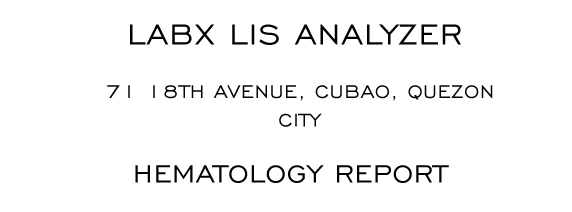
<style>
.page{position:relative;width:572px;height:212px;background:#ffffff}
.page>*{position:absolute;margin:0}
.t1{font:37.2px "EngraversGothicBT-Regular";letter-spacing:0.025em;color:#000401;text-transform:uppercase}
.t2{font:23.9px "EngraversGothicBT-Regular";letter-spacing:0.025em;color:#000401;text-transform:uppercase}
.t3{font:32.2px "EngraversGothicBT-Regular";letter-spacing:0.025em;color:#000401;text-transform:uppercase}
</style>
<div class="page">
<p class="t1" style="left:130px;top:24px;width:331px;height:21px">LABX Lis Analyzer</p>
<p class="t2" style="left:107px;top:85px;width:386px;height:42px;text-align:center">71 18th avenue, cubao, quezon city</p>
<p class="t3" style="left:135px;top:165px;width:314px;height:18px">Hematology report</p>
</div>
